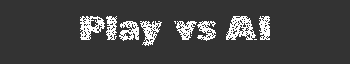
<style>
.page{position:relative;width:350px;height:64px;background:#333333}
.page>*{position:absolute;margin:0}
.t1{font:32px "GillSans-UltraBold";color:#ffffff}
</style>
<div class="page">
<p class="t1" style="left:80px;top:16px;width:190px;height:30px;opacity:0.75">Play vs AI</p>
</div>
